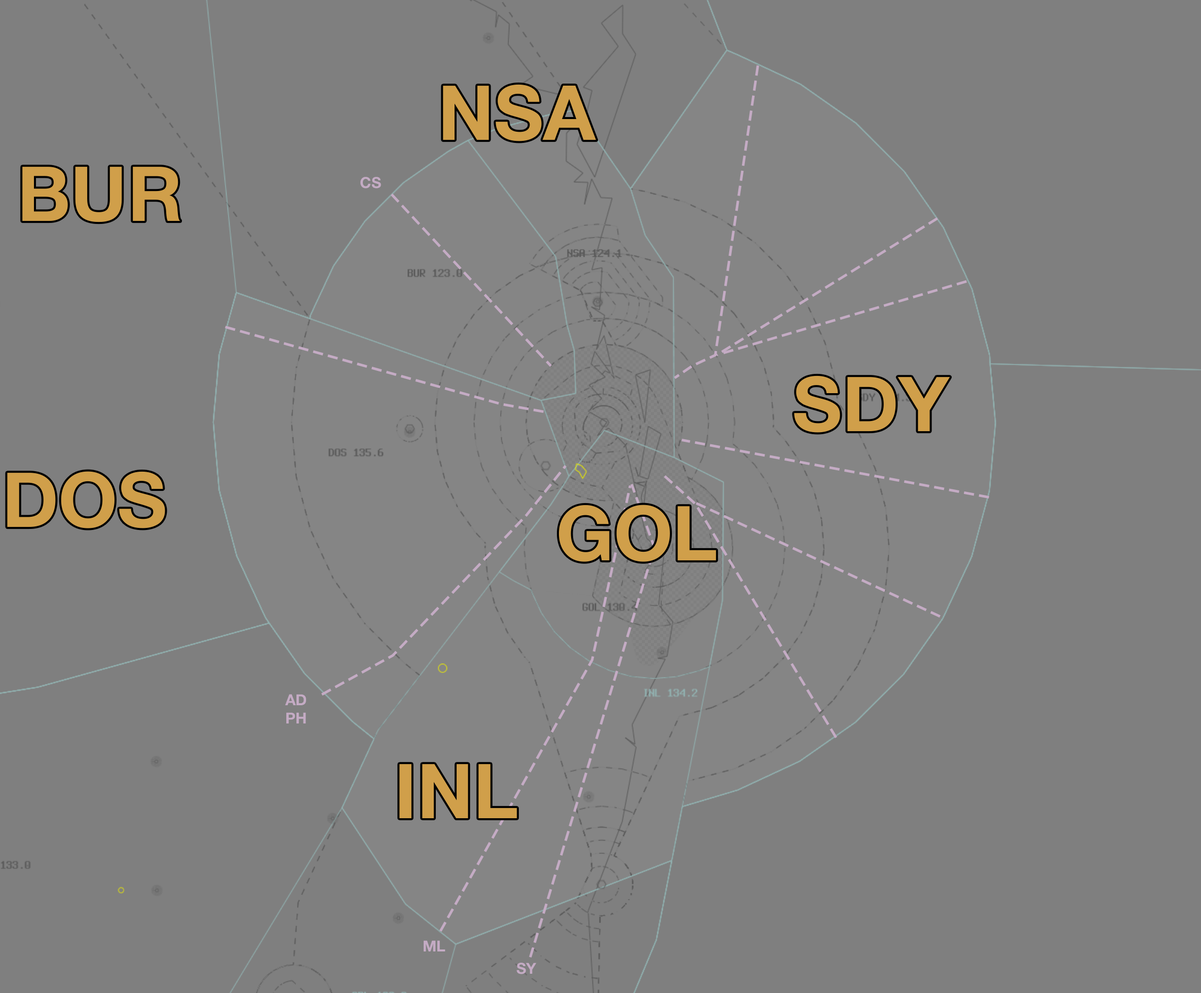
<style>
.page{position:relative;width:1201px;height:993px;background:#7f7f7f}
.page>*{position:absolute;margin:0}
.t1{font:76px "HelveticaNeue-Bold";color:#d09f4a}
.t2{font:15.2px "HelveticaNeue-Bold";color:#c4abc4}
</style>
<div class="page">
<p class="t1" style="left:443px;top:84px;width:153px;height:57px">NSA</p>
<p class="t1" style="left:22px;top:167px;width:158px;height:55px">BUR</p>
<p class="t2" style="left:360px;top:177px;width:21px;height:11px">CS</p>
<p class="t1" style="left:794px;top:375px;width:156px;height:58px">SDY</p>
<p class="t1" style="left:7px;top:471px;width:158px;height:57px">DOS</p>
<p class="t1" style="left:558px;top:505px;width:158px;height:57px">GOL</p>
<p class="t2" style="left:285px;top:694px;width:21px;height:30px;text-align:center">AD<br>PH</p>
<p class="t1" style="left:399px;top:764px;width:118px;height:54px">INL</p>
<p class="t2" style="left:424px;top:940px;width:21px;height:12px">ML</p>
<p class="t2" style="left:516px;top:963px;width:21px;height:11px">SY</p>
</div>
